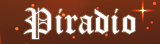
<style>
.page{position:relative;width:160px;height:44px}
.page>*{position:absolute;margin:0}
.t1{font:36px "OldEnglishTextMT";color:#ffffff}
</style>
<div class="page">
<p class="t1" style="left:24px;top:8px;width:111px;height:31px">Piradio</p>
</div>
